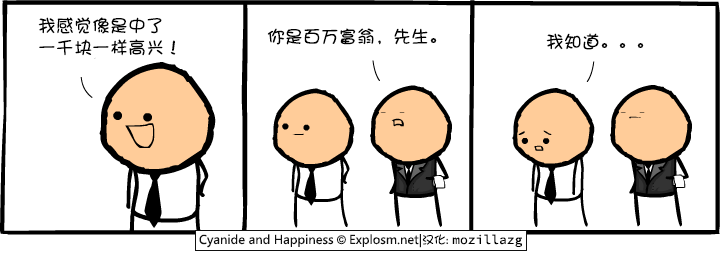
<style>
.page{position:relative;width:720px;height:255px;background:#ffffff}
.page>*{position:absolute;margin:0}
.t1{font:18px/22px "DFShaoNvW5";color:#000000}
.t2{font:18px "DFShaoNvW5";color:#000000}
</style>
<div class="page">
<p class="t1" style="left:38px;top:17px;width:138px;height:39px">我感觉像是中了<br>一千块一样高兴！</p>
<p class="t2" style="left:267px;top:28px;width:170px;height:17px">你是百万富翁，先生。</p>
<p class="t2" style="left:546px;top:33px;width:98px;height:17px">我知道。。。</p>
</div>
